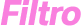
<style>
.page{position:relative;width:82px;height:26px;background:#ffffff}
.page>*{position:absolute;margin:0}
.t1{font:32px "RodinPro-EB";letter-spacing:-0.046em;color:#f980de;font-style:italic}
</style>
<div class="page">
<p class="t1" style="left:0px;top:0px;width:81px;height:26px">Filtro</p>
</div>
